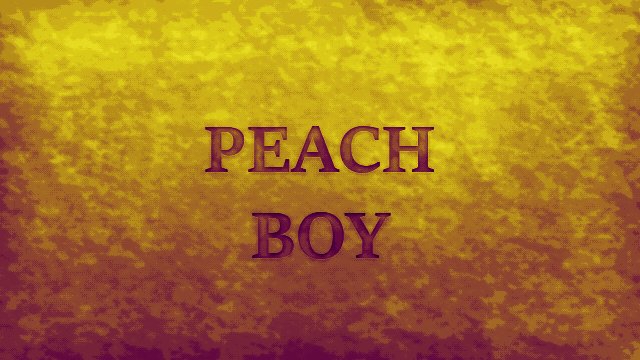
<style>
.page{position:relative;width:640px;height:360px}
.page>*{position:absolute;margin:0}
.t1{font:72px "SitkaSubheading-Bold"}
</style>
<div class="page">
<p class="t1" style="left:205px;top:126px;width:229px;height:133px;text-align:center">PEACH<br>BOY</p>
</div>
